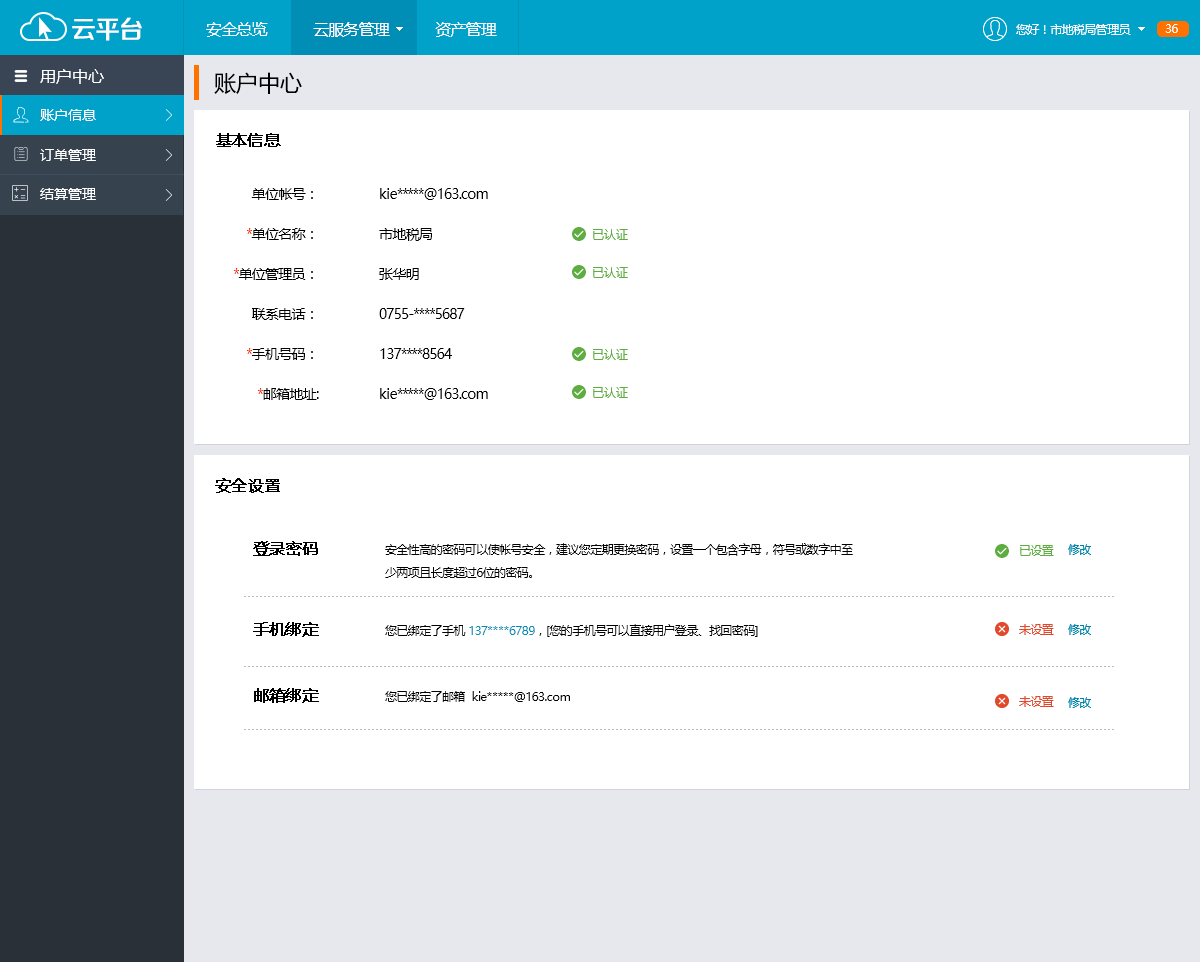
<style>
.page{position:relative;width:1200px;height:962px;background:#ffffff}
.page>*{position:absolute;margin:0}
.t1{font:25.4px "FZZZHONGJW--GB1-0";letter-spacing:-0.05em;color:#ffffff}
.t2{font:16px "MicrosoftYaHei";letter-spacing:-0.05em;color:#ffffff}
.t3{font:12px "MicrosoftYaHei";letter-spacing:-0.05em;color:#ffffff}
.t4{font:16px "MicrosoftYaHei";color:#ffffff}
.t5{font:22px "MicrosoftYaHei";color:#000000}
.t6{font:14px "MicrosoftYaHei";color:#ffffff}
.t7{font:16px "MicrosoftYaHei";letter-spacing:-0.05em;color:#000000;font-weight:bold}
.t8{font:14px/40px "MicrosoftYaHei";letter-spacing:-0.05em;color:#000000}
.t9{font:14px/40px "MicrosoftYaHei";letter-spacing:-0.05em;color:#fa2e06}
.t10{font:12px/23.6px "MicrosoftYaHei";letter-spacing:-0.05em;color:#000000}
.t11{font:12px "MicrosoftYaHei";letter-spacing:-0.05em;color:#000000}
.t12{font:12px "MicrosoftYaHei";letter-spacing:-0.05em;color:#008eb7}
</style>
<div class="page">
<p class="t1" style="left:72px;top:17px;width:70px;height:24px">云平台</p>
<p class="t2" style="left:206px;top:22px;width:291px;height:15px">安全总览           云服务管理           资产管理</p>
<p class="t3" style="left:1016px;top:24px;width:115px;height:11px">您好！市地税局管理员</p>
<p class="t3" style="left:1165px;top:24px;width:13px;height:9px">36</p>
<p class="t4" style="left:40px;top:69px;width:64px;height:15px">用户中心</p>
<p class="t5" style="left:214px;top:72px;width:88px;height:22px">账户中心</p>
<p class="t6" style="left:40px;top:109px;width:56px;height:12px">账户信息</p>
<p class="t7" style="left:216px;top:133px;width:65px;height:14px">基本信息</p>
<p class="t6" style="left:40px;top:149px;width:56px;height:12px">订单管理</p>
<p class="t6" style="left:40px;top:188px;width:56px;height:12px">结算管理</p>
<p class="t8" style="left:234px;top:188px;width:85px;height:212px;text-align:right">单位帐号：<br><span class="t9">*</span>单位名称：<br><span class="t9">*</span>单位管理员：<br>联系电话：<br><span class="t9">*</span>手机号码：<br><span class="t9">*</span>邮箱地址:</p>
<p class="t8" style="left:379px;top:188px;width:109px;height:212px">kie*****@163.com<br>市地税局<br>张华明<br>0755-****5687<br>137****8564<br>kie*****@163.com</p>
<p class="t7" style="left:215px;top:478px;width:65px;height:15px">安全设置</p>
<p class="t7" style="left:253px;top:541px;width:65px;height:15px">登录密码</p>
<p class="t10" style="left:385px;top:543px;width:468px;height:35px">安全性高的密码可以使帐号安全，建议您定期更换密码，设置一个包含字母，符号或数字中至少两项且长度超过6位的密码。</p>
<p class="t7" style="left:253px;top:622px;width:66px;height:15px">手机绑定</p>
<p class="t11" style="left:385px;top:624px;width:373px;height:13px">您已绑定了手机 <span class="t12">137****6789</span>，[您的手机号可以直接用户登录、找回密码]</p>
<p class="t7" style="left:254px;top:688px;width:65px;height:15px">邮箱绑定</p>
<p class="t11" style="left:385px;top:691px;width:185px;height:11px">您已绑定了邮箱  kie*****@163.com</p>
</div>
